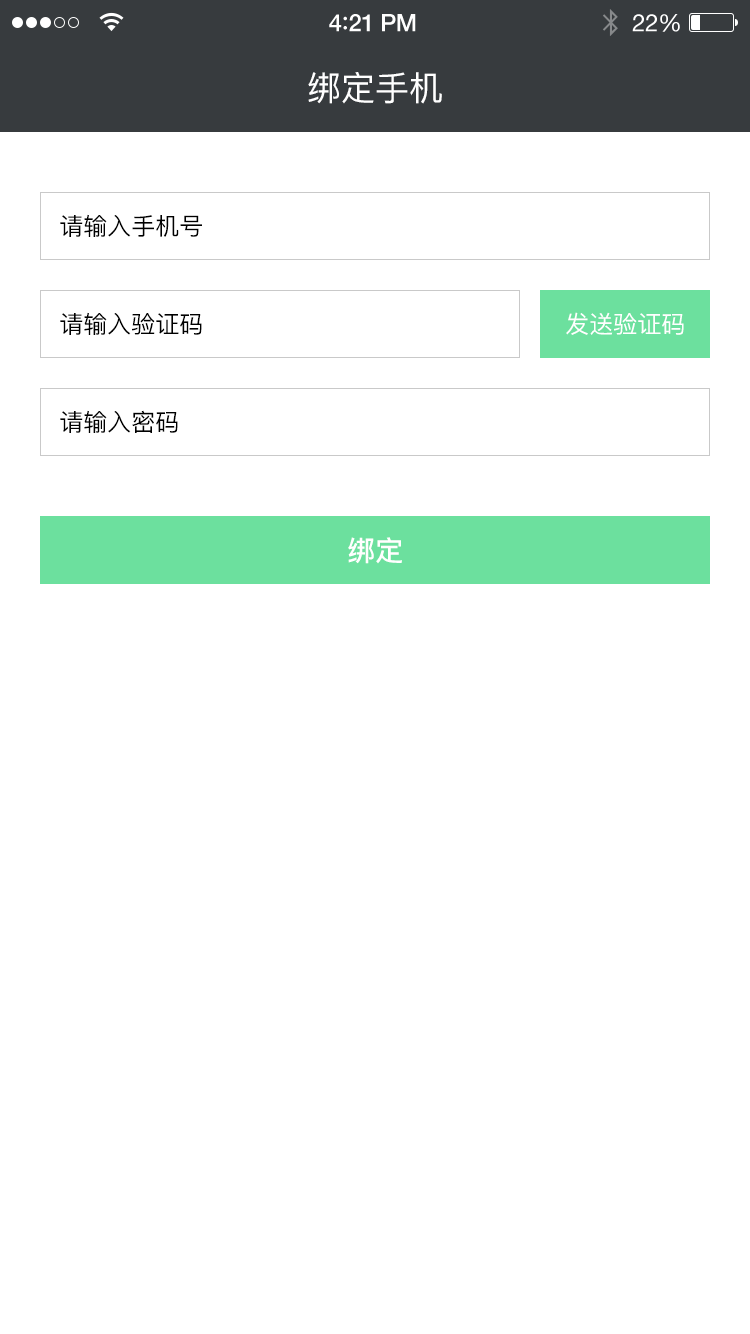
<style>
.page{position:relative;width:750px;height:1334px;background:#ffffff}
.page>*{position:absolute;margin:0}
.t1{font:34px "PingFangSC-Regular";color:#ffffff}
.t2{font:24px "PingFangSC-Regular";color:#000000}
.t3{font:24px "PingFangSC-Regular";color:#ffffff}
.t4{font:28px "PingFangSC-Medium";color:#ffffff}
</style>
<div class="page">
<p class="t1" style="left:308px;top:72px;width:134px;height:32px">绑定手机</p>
<p class="t2" style="left:60px;top:214px;width:142px;height:23px">请输入手机号</p>
<p class="t2" style="left:60px;top:312px;width:142px;height:23px">请输入验证码</p>
<p class="t3" style="left:566px;top:312px;width:118px;height:23px">发送验证码</p>
<p class="t2" style="left:60px;top:410px;width:118px;height:23px">请输入密码</p>
<p class="t4" style="left:348px;top:537px;width:54px;height:27px">绑定</p>
</div>
